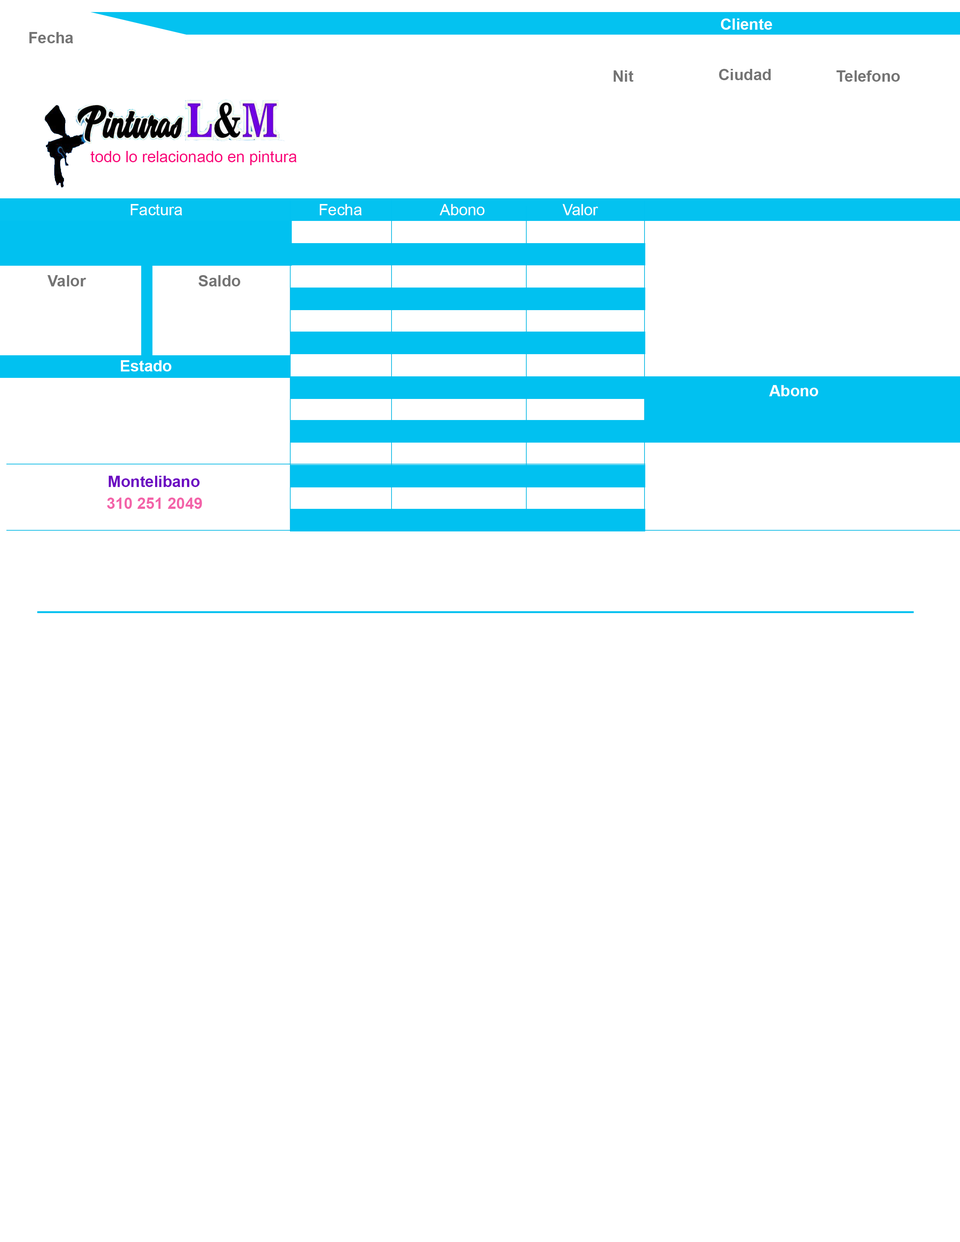
<style>
.page{position:relative;width:960px;height:1242px;background:#ffffff}
.page>*{position:absolute;margin:0}
.t1{font:15.7px "Arial-BoldMT";color:#ffffff}
.t2{font:15.7px "Arial-BoldMT";color:#747474}
.t3{font:15.7px "ArialMT";color:#f90379}
.t4{font:15.7px "Arial-BoldMT";color:#6c0ac2}
.t5{font:15.7px "Arial-BoldMT";color:#f363a9}
</style>
<div class="page">
<p class="t1" style="left:721px;top:18px;width:51px;height:12px">Cliente</p>
<p class="t2" style="left:29px;top:32px;width:44px;height:11px">Fecha</p>
<p class="t2" style="left:614px;top:70px;width:20px;height:12px">Nit</p>
<p class="t2" style="left:719px;top:69px;width:52px;height:11px">Ciudad</p>
<p class="t2" style="left:836px;top:70px;width:64px;height:12px">Telefono</p>
<p class="t3" style="left:90px;top:151px;width:207px;height:14px">todo lo relacionado en pintura</p>
<p class="t2" style="left:47px;top:275px;width:39px;height:11px">Valor</p>
<p class="t2" style="left:198px;top:275px;width:43px;height:11px">Saldo</p>
<p class="t1" style="left:121px;top:360px;width:51px;height:12px">Estado</p>
<p class="t1" style="left:769px;top:385px;width:49px;height:11px">Abono</p>
<p class="t4" style="left:108px;top:476px;width:92px;height:11px">Montelibano</p>
<p class="t5" style="left:107px;top:498px;width:95px;height:11px">310 251 2049</p>
</div>
